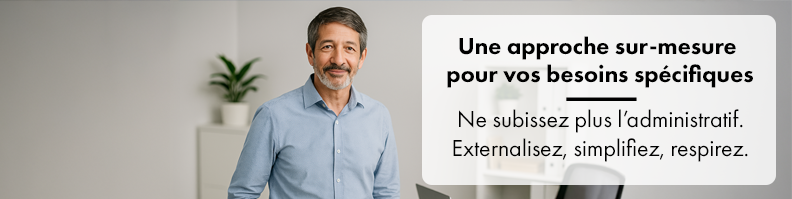
<style>
.page{position:relative;width:792px;height:199px}
.page>*{position:absolute;margin:0}
.t1{font:23.9px "FuturaPT-Heavy";color:#000000}
.t2{font:24px "FuturaPT-Book";color:#000000}
</style>
<div class="page">
<p class="t1" style="left:447px;top:36px;width:306px;height:52px;text-align:center">Une approche sur-mesure <br>pour vos besoins spécifiques</p>
<p class="t2" style="left:453px;top:109px;width:295px;height:53px;text-align:center">Ne subissez plus l’administratif.<br>Externalisez, simplifiez, respirez.</p>
</div>
